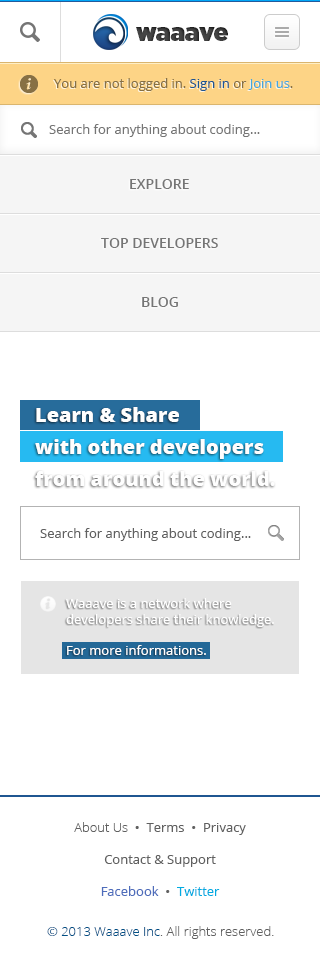
<style>
.page{position:relative;width:320px;height:969px;background:#ffffff}
.page>*{position:absolute;margin:0}
.t1{font:24.5px "Gotham-Ultra";color:#454545}
.t2{font:13px "OpenSans";color:#877044}
.t3{font:13px "OpenSans";color:#1f5691}
.t4{font:13px "OpenSans";color:#46a7df}
.t5{font:13px "OpenSans";color:#757575}
.t6{font:14px "OpenSans-Semibold";color:#757575}
.t7{font:20px/32px "OpenSans-Extrabold";color:#fefefe}
.t8{font:13px "OpenSans";color:#606060}
.t9{font:13px/32px "OpenSans";color:#606060}
.t10{font:13px/32px "OpenSans-Light";color:#606060}
.t11{font:13px/32px "OpenSans";color:#4e6dbb}
.t12{font:13px/32px "OpenSans";color:#01abe1}
.t13{font:13px "OpenSans-Light";color:#606060}
.t14{font:13px "OpenSans-Light";color:#005086}
</style>
<div class="page">
<p class="t1" style="left:136px;top:27px;width:92px;height:14px">waaave</p>
<p class="t2" style="left:54px;top:78px;width:239px;height:13px">You are not logged in. <span class="t3">Sign in</span> or <span class="t4">Join us</span>.</p>
<p class="t5" style="left:49px;top:124px;width:211px;height:13px">Search for anything about coding...</p>
<p class="t6" style="left:130px;top:179px;width:59px;height:10px">EXPLORE</p>
<p class="t6" style="left:101px;top:238px;width:117px;height:10px">TOP DEVELOPERS</p>
<p class="t6" style="left:142px;top:297px;width:36px;height:10px">BLOG</p>
<p class="t7" style="left:35px;top:407px;width:240px;height:79px">Learn &amp; Share<br>with other developers<br>from around the world.</p>
<p class="t8" style="left:40px;top:528px;width:211px;height:13px">Search for anything about coding...</p>
<p class="t9" style="left:74px;top:822px;width:172px;height:74px;text-align:center"><span class="t10">About Us  </span>•  Terms  •  Privacy<br>Contact &amp; Support<br><span class="t11">Facebook</span>  •  <span class="t12">Twitter</span></p>
<p class="t13" style="left:47px;top:926px;width:227px;height:13px"><span class="t14">© 2013 Waaave Inc</span>. All rights reserved.</p>
</div>
